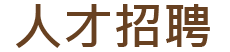
<style>
.page{position:relative;width:230px;height:52px;background:#ffffff}
.page>*{position:absolute;margin:0}
.t1{font:50px "MicrosoftJhengHeiBold";color:#684121}
</style>
<div class="page">
<p class="t1" style="left:16px;top:4px;width:194px;height:44px">人才招聘</p>
</div>
